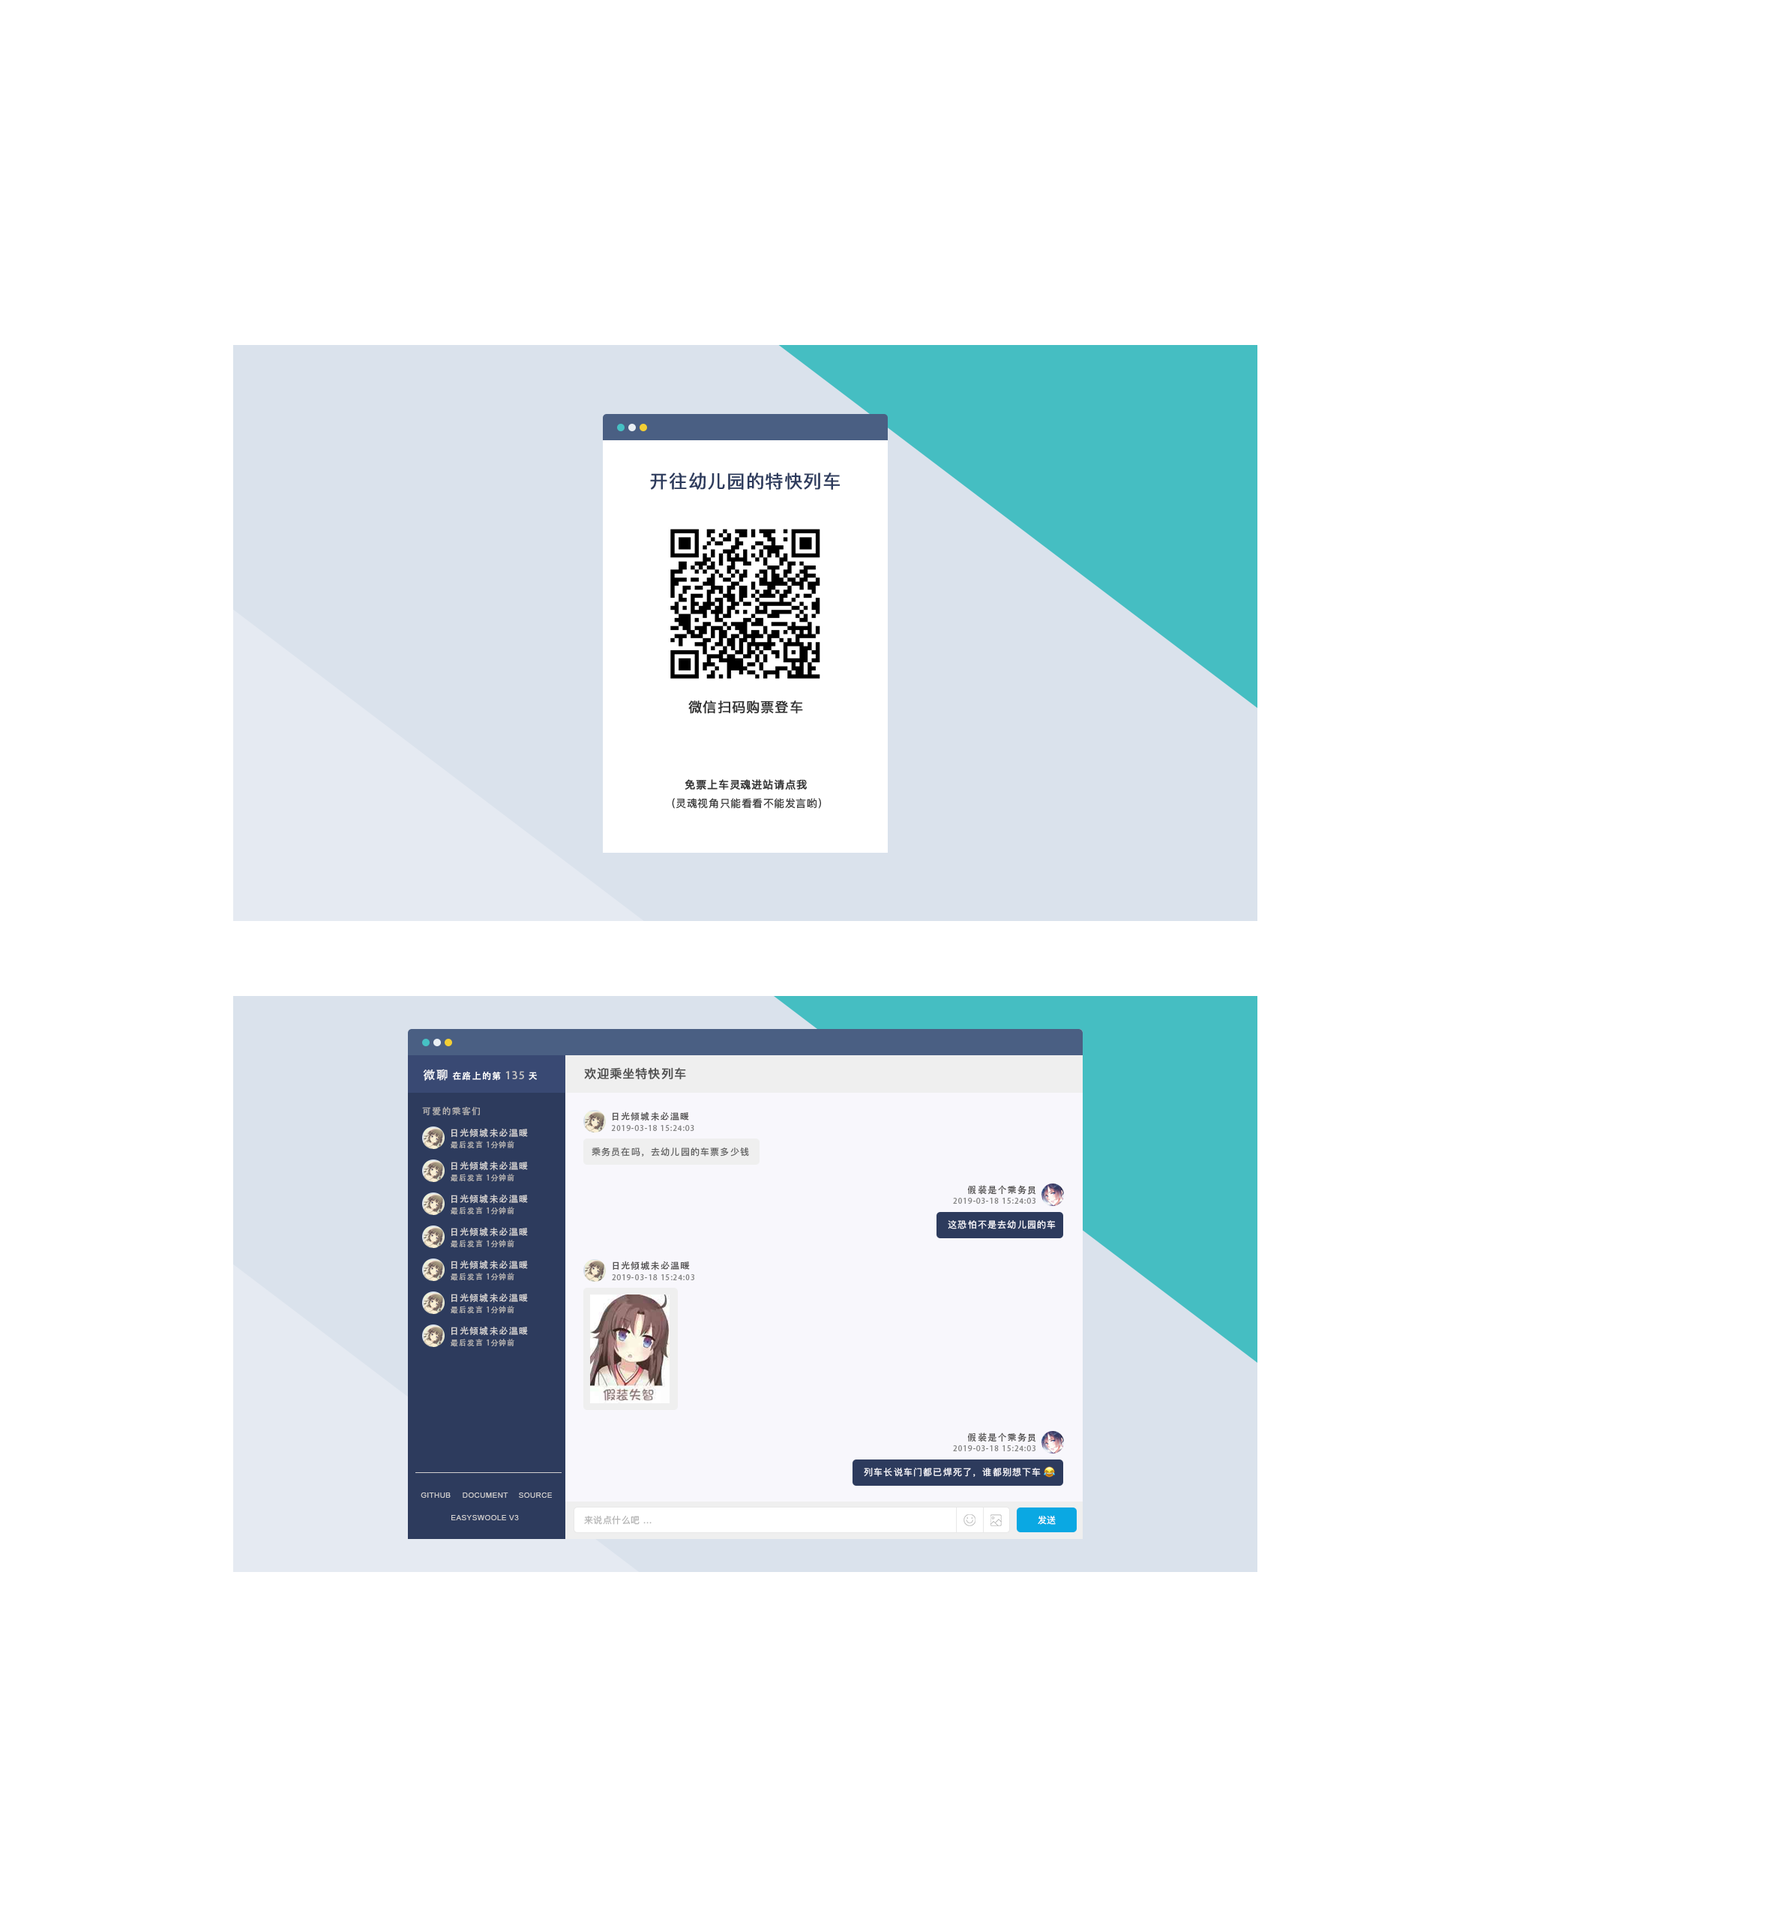
<style>
.page{position:relative;width:1792px;height:1920px;background:#ffffff}
.page>*{position:absolute;margin:0}
.t1{font:18px "PingFangSC-Regular";letter-spacing:0.04em;color:#2d3b5d;text-transform:uppercase;font-weight:bold}
.t2{font:13.5px "PingFangSC-Regular";letter-spacing:0.04em;color:#333333;text-transform:uppercase;font-weight:bold}
.t3{font:10.5px "PingFangSC-Regular";letter-spacing:0.04em;color:#333333;text-transform:uppercase;font-weight:bold}
.t4{font:10.5px "PingFangSC-Regular";letter-spacing:0.04em;color:#333333;text-transform:uppercase}
.t5{font:12px "AdobeHeitiStd-Regular";letter-spacing:0.1em;color:#ffffff;text-transform:uppercase}
.t6{font:9px "AdobeHeitiStd-Regular";letter-spacing:0.1em;color:#ffffff;text-transform:uppercase}
.t7{font:10.5px "AdobeHeitiStd-Regular";letter-spacing:0.1em;color:#c2c1c1;text-transform:uppercase}
.t8{font:12px "PingFangSC-Regular";letter-spacing:0.04em;color:#515151;text-transform:uppercase;font-weight:bold}
.t9{font:9px "AdobeHeitiStd-Regular";letter-spacing:0.1em;color:#afadad;text-transform:uppercase}
.t10{font:9px "AdobeHeitiStd-Regular";letter-spacing:0.1em;color:#585656;text-transform:uppercase}
.t11{font:9px "AdobeHeitiStd-Regular";letter-spacing:0.1em;color:#d1cfcf;text-transform:uppercase}
.t12{font:7.5px "AdobeHeitiStd-Regular";letter-spacing:0.1em;color:#868686;text-transform:uppercase}
.t13{font:7.5px "AdobeHeitiStd-Regular";letter-spacing:0.1em;color:#afadad;text-transform:uppercase}
.t14{font:9px "PingFangSC-Regular";letter-spacing:0.1em;color:#616161;text-transform:uppercase}
.t15{font:9px "PingFangSC-Regular";letter-spacing:0.1em;color:#f8f7fc;text-transform:uppercase}
.t16{font:7.5px "ArialMT";letter-spacing:0.04em;color:#d1cfcf}
.t17{font:7.5px "ArialMT";letter-spacing:0.04em;color:#d1cfcf;text-transform:uppercase}
.t18{font:9px "PingFangSC-Regular";letter-spacing:0.04em;color:#b4b4b4;text-transform:uppercase}
.t19{font:9px "PingFangSC-Regular";letter-spacing:0.04em;color:#ffffff;text-transform:uppercase}
</style>
<div class="page">
<p class="t1" style="left:650px;top:472px;width:190px;height:18px">开往幼儿园的特快列车</p>
<p class="t2" style="left:688px;top:700px;width:115px;height:14px">微信扫码购票登车</p>
<p class="t3" style="left:685px;top:779px;width:122px;height:11px">免票上车灵魂进站请点我</p>
<p class="t4" style="left:672px;top:798px;width:149px;height:10px">(灵魂视角只能看看不能发言哟)</p>
<p class="t5" style="left:423px;top:1069px;width:25px;height:12px">微聊</p>
<p class="t6" style="left:452px;top:1071px;width:85px;height:10px">在路上的第 <span class="t7">135</span> 天</p>
<p class="t8" style="left:584px;top:1067px;width:102px;height:13px">欢迎乘坐特快列车</p>
<p class="t9" style="left:422px;top:1106px;width:58px;height:9px">可爱的乘客们</p>
<p class="t10" style="left:612px;top:1111px;width:77px;height:10px">日光倾城未必温暖</p>
<p class="t11" style="left:451px;top:1128px;width:77px;height:10px">日光倾城未必温暖</p>
<p class="t12" style="left:611px;top:1125px;width:83px;height:6px">2019-03-18 15:24:03</p>
<p class="t13" style="left:451px;top:1141px;width:63px;height:8px">最后发言 1分钟前</p>
<p class="t14" style="left:592px;top:1147px;width:157px;height:9px">乘务员在吗，去幼儿园的车票多少钱</p>
<p class="t11" style="left:451px;top:1161px;width:77px;height:10px">日光倾城未必温暖</p>
<p class="t13" style="left:451px;top:1174px;width:63px;height:8px">最后发言 1分钟前</p>
<p class="t11" style="left:451px;top:1194px;width:77px;height:10px">日光倾城未必温暖</p>
<p class="t10" style="left:967px;top:1185px;width:69px;height:10px">假装是个乘务员</p>
<p class="t12" style="left:953px;top:1198px;width:83px;height:6px">2019-03-18 15:24:03</p>
<p class="t13" style="left:451px;top:1207px;width:63px;height:8px">最后发言 1分钟前</p>
<p class="t11" style="left:451px;top:1227px;width:77px;height:10px">日光倾城未必温暖</p>
<p class="t15" style="left:948px;top:1220px;width:108px;height:9px">这恐怕不是去幼儿园的车</p>
<p class="t13" style="left:451px;top:1240px;width:63px;height:8px">最后发言 1分钟前</p>
<p class="t11" style="left:451px;top:1260px;width:77px;height:10px">日光倾城未必温暖</p>
<p class="t10" style="left:613px;top:1261px;width:77px;height:9px">日光倾城未必温暖</p>
<p class="t13" style="left:451px;top:1273px;width:63px;height:8px">最后发言 1分钟前</p>
<p class="t12" style="left:612px;top:1274px;width:82px;height:6px">2019-03-18 15:24:03</p>
<p class="t11" style="left:451px;top:1293px;width:77px;height:10px">日光倾城未必温暖</p>
<p class="t13" style="left:451px;top:1306px;width:63px;height:8px">最后发言 1分钟前</p>
<p class="t11" style="left:451px;top:1326px;width:77px;height:10px">日光倾城未必温暖</p>
<p class="t13" style="left:451px;top:1339px;width:63px;height:8px">最后发言 1分钟前</p>
<p class="t10" style="left:967px;top:1432px;width:69px;height:10px">假装是个乘务员</p>
<p class="t12" style="left:953px;top:1445px;width:83px;height:6px">2019-03-18 15:24:03</p>
<p class="t15" style="left:864px;top:1468px;width:177px;height:9px">列车长说车门都已焊死了，谁都别想下车</p>
<p class="t16" style="left:421px;top:1492px;width:30px;height:6px">GITHUB</p>
<p class="t17" style="left:463px;top:1492px;width:45px;height:6px">DOCUMENT</p>
<p class="t17" style="left:519px;top:1492px;width:33px;height:6px">SOURCE</p>
<p class="t17" style="left:451px;top:1515px;width:68px;height:5px">EASYSWOOLE V3</p>
<p class="t18" style="left:584px;top:1516px;width:68px;height:9px">来说点什么吧 ...</p>
<p class="t19" style="left:1038px;top:1516px;width:18px;height:9px">发送</p>
</div>
